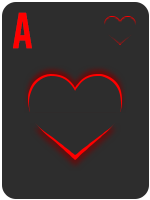
<style>
.page{position:relative;width:150px;height:200px;background:#2d2d2d}
.page>*{position:absolute;margin:0}
.t1{font:50.8px "Bebas-Regular";color:#ff0000}
</style>
<div class="page">
<p class="t1" style="left:13px;top:12px;width:19px;height:37px">a</p>
</div>
